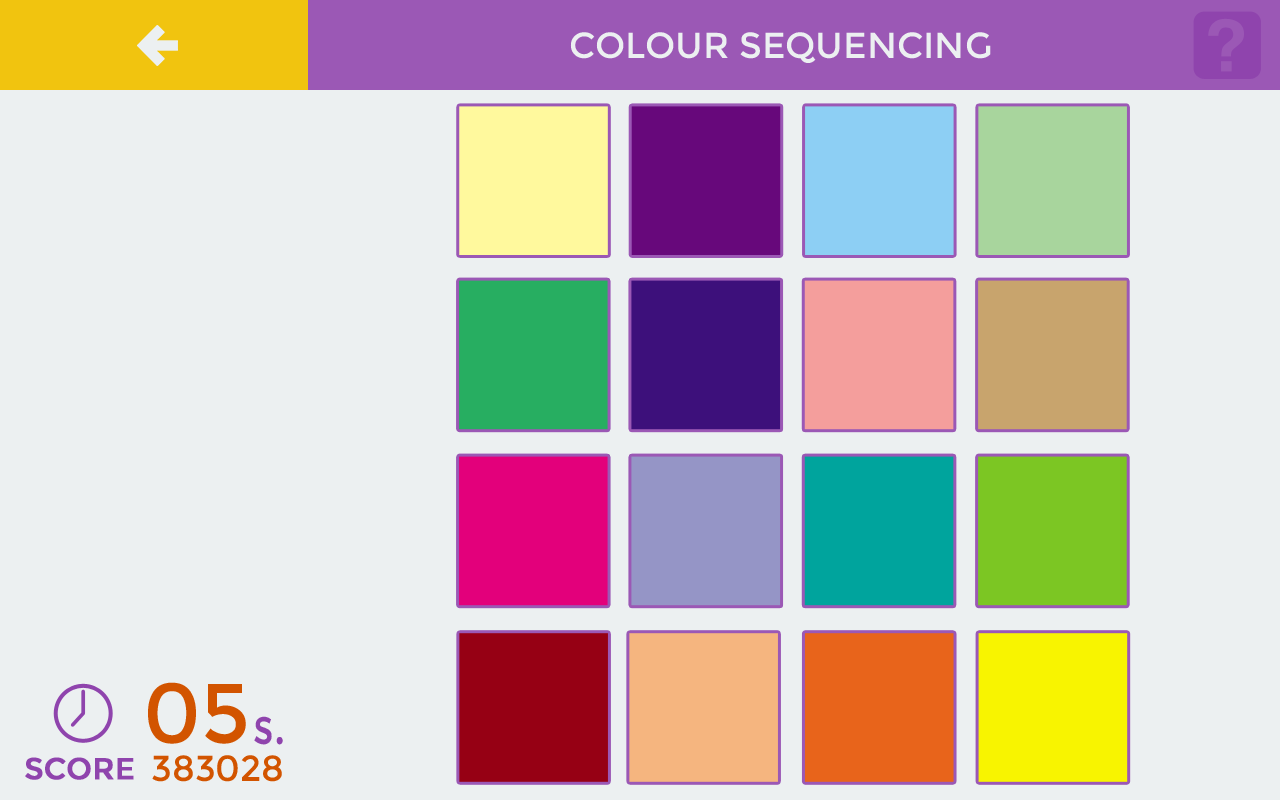
<style>
.page{position:relative;width:1280px;height:800px;background:#ecf0f1}
.page>*{position:absolute;margin:0}
.t1{font:36px "Montserrat-Regular";color:#ecf0f1;text-transform:uppercase}
.t2{font:84.2px "Montserrat-Regular";color:#d25400}
.t3{font:50.5px "Montserrat-Regular";color:#8f44ad;scale:0.8 1}
.t4{font:30px "Montserrat-Regular";color:#8f44ad;font-weight:bold}
.t5{font:36px "Montserrat-Regular";color:#d25400}
</style>
<div class="page">
<p class="t1" style="left:570px;top:32px;width:421px;height:31px">colour sequencing</p>
<p class="t2" style="left:148px;top:682px;width:98px;height:62px">05</p>
<p class="t3" style="left:254px;top:716px;width:29px;height:29px">s.</p>
<p class="t4" style="left:25px;top:757px;width:109px;height:23px">SCORE</p>
<p class="t5" style="left:152px;top:755px;width:130px;height:27px">383028</p>
</div>
